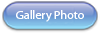
<style>
.page{position:relative;width:100px;height:33px}
.page>*{position:absolute;margin:0}
.t1{font:11.9px "MyriadPro-Regular";color:#ffffff}
</style>
<div class="page">
<p class="t1" style="left:16px;top:10px;width:68px;height:12px">Gallery Photo</p>
</div>
